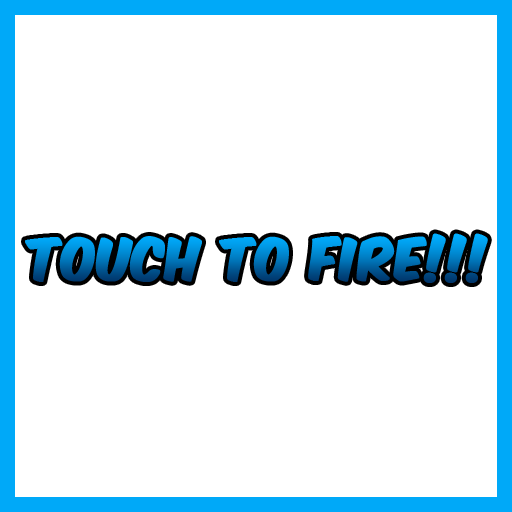
<style>
.page{position:relative;width:512px;height:512px;background:#ffffff}
.page>*{position:absolute;margin:0}
.t1{font:50px "KomikaAxis";font-weight:bold}
</style>
<div class="page">
<p class="t1" style="left:25px;top:233px;width:463px;height:50px">Touch to Fire!!!</p>
</div>
